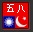
<style>
.page{position:relative;width:33px;height:32px;background:#f20000}
.page>*{position:absolute;margin:0}
.t1{font:10.4px "SimSun";color:#ffffff}
</style>
<div class="page">
<p class="t1" style="left:7px;top:4px;width:18px;height:9px">五八</p>
</div>
